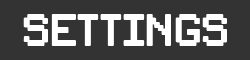
<style>
.page{position:relative;width:250px;height:60px;background:#333333}
.page>*{position:absolute;margin:0}
.t1{font:40px "PixelSplitter-Bold";color:#ffffff}
</style>
<div class="page">
<p class="t1" style="left:23px;top:14px;width:204px;height:32px">Settings</p>
</div>
